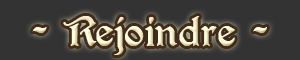
<style>
.page{position:relative;width:300px;height:60px;background:#333333}
.page>*{position:absolute;margin:0}
.t1{font:30px "PerryGothic";color:#fcf4d2}
</style>
<div class="page">
<p class="t1" style="left:32px;top:16px;width:235px;height:39px">- Rejoindre -</p>
</div>
